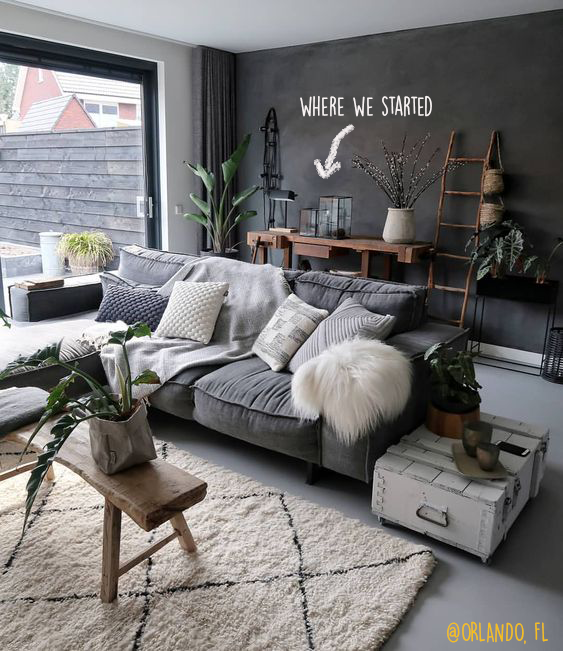
<style>
.page{position:relative;width:563px;height:651px}
.page>*{position:absolute;margin:0}
.t1{font:24px "DKLemonYellowSun";color:#f9f4f4}
.t2{font:24px "DKLemonYellowSun";color:#f6bf1c}
</style>
<div class="page">
<p class="t1" style="left:300px;top:95px;width:132px;height:22px">where we started</p>
<p class="t2" style="left:447px;top:621px;width:101px;height:24px">@ORLANDO, FL</p>
</div>
